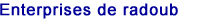
<style>
.page{position:relative;width:200px;height:20px;background:#ffffff}
.page>*{position:absolute;margin:0}
.t1{font:16px "ArialMT";letter-spacing:0.04em;color:#000099;font-weight:bold}
</style>
<div class="page">
<p class="t1" style="left:0px;top:3px;width:178px;height:16px">Enterprises de radoub</p>
</div>
